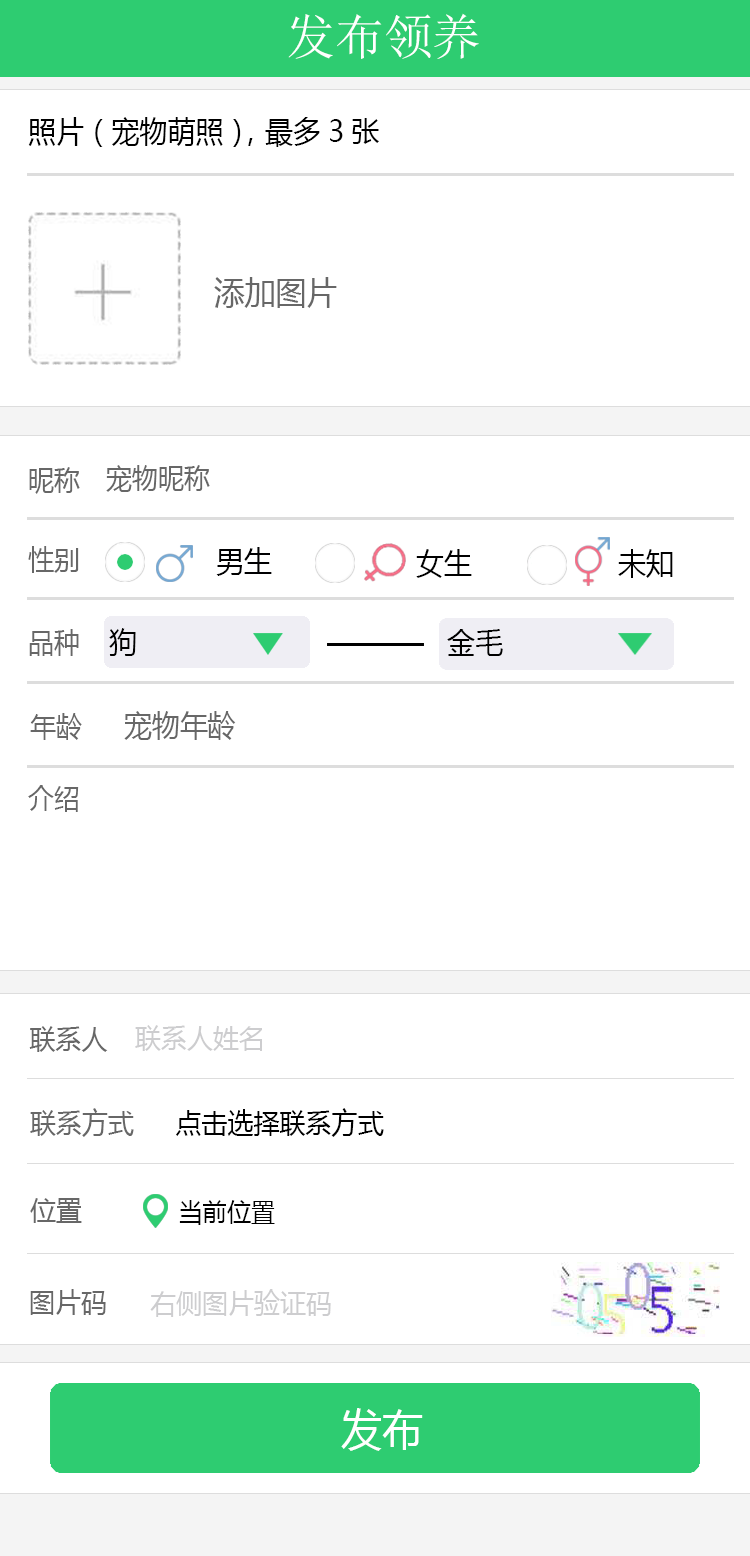
<style>
.page{position:relative;width:750px;height:1556px;background:#ffffff}
.page>*{position:absolute;margin:0}
.t1{font:48.7px "SimSun";color:#ffffff}
.t2{font:30px "MicrosoftYaHei";color:#000000;scale:0.93 1}
.t3{font:33px "MicrosoftYaHei";color:#676767;scale:0.93 1}
.t4{font:28px "MicrosoftYaHei";color:#676767;scale:0.93 1}
.t5{font:30px "MicrosoftYaHei";color:#000001;scale:0.93 1}
.t6{font:30px "MicrosoftYaHei";color:#676767;scale:0.93 1}
.t7{font:28px "MicrosoftYaHei";color:#cdcdcf;scale:0.93 1}
.t8{font:28px "MicrosoftYaHei";color:#000000;scale:0.93 1}
.t9{font:26px "MicrosoftYaHei";color:#000000;scale:0.93 1}
.t10{font:44px "MicrosoftYaHei";color:#ffffff;scale:0.93 1}
</style>
<div class="page">
<p class="t1" style="left:288px;top:13px;width:191px;height:46px">发布领养</p>
<p class="t2" style="left:28px;top:117px;width:351px;height:30px">照片（宠物萌照），最多3张</p>
<p class="t3" style="left:214px;top:277px;width:123px;height:31px">添加图片</p>
<p class="t4" style="left:29px;top:467px;width:51px;height:27px">昵称</p>
<p class="t4" style="left:106px;top:465px;width:104px;height:27px">宠物昵称</p>
<p class="t4" style="left:28px;top:546px;width:51px;height:27px">性别</p>
<p class="t5" style="left:216px;top:547px;width:56px;height:29px">男生</p>
<p class="t2" style="left:416px;top:549px;width:56px;height:29px">女生</p>
<p class="t2" style="left:618px;top:549px;width:55px;height:29px">未知</p>
<p class="t4" style="left:29px;top:629px;width:50px;height:27px">品种</p>
<p class="t2" style="left:109px;top:628px;width:27px;height:28px">狗</p>
<p class="t2" style="left:447px;top:629px;width:56px;height:27px">金毛</p>
<p class="t4" style="left:30px;top:713px;width:52px;height:27px">年龄</p>
<p class="t6" style="left:124px;top:711px;width:112px;height:29px">宠物年龄</p>
<p class="t4" style="left:28px;top:785px;width:51px;height:27px">介绍</p>
<p class="t7" style="left:135px;top:1025px;width:127px;height:26px">联系人姓名</p>
<p class="t4" style="left:29px;top:1026px;width:79px;height:26px">联系人</p>
<p class="t4" style="left:30px;top:1108px;width:104px;height:29px">联系方式</p>
<p class="t8" style="left:176px;top:1108px;width:208px;height:29px">点击选择联系方式</p>
<p class="t4" style="left:30px;top:1198px;width:52px;height:25px">位置</p>
<p class="t9" style="left:179px;top:1200px;width:96px;height:25px">当前位置</p>
<p class="t4" style="left:30px;top:1289px;width:76px;height:26px">图片码</p>
<p class="t7" style="left:150px;top:1289px;width:181px;height:28px">右侧图片验证码</p>
<p class="t10" style="left:341px;top:1408px;width:82px;height:43px">发布</p>
</div>
